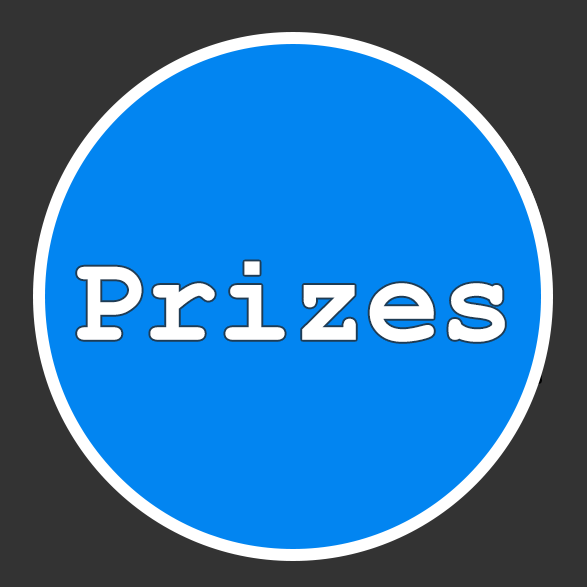
<style>
.page{position:relative;width:587px;height:587px;background:#0285f1}
.page>*{position:absolute;margin:0}
.t1{font:123.1px "CourierNewPS-BoldMT";color:#ffffff}
</style>
<div class="page">
<p class="t1" style="left:77px;top:261px;width:428px;height:81px">Prizes</p>
</div>
